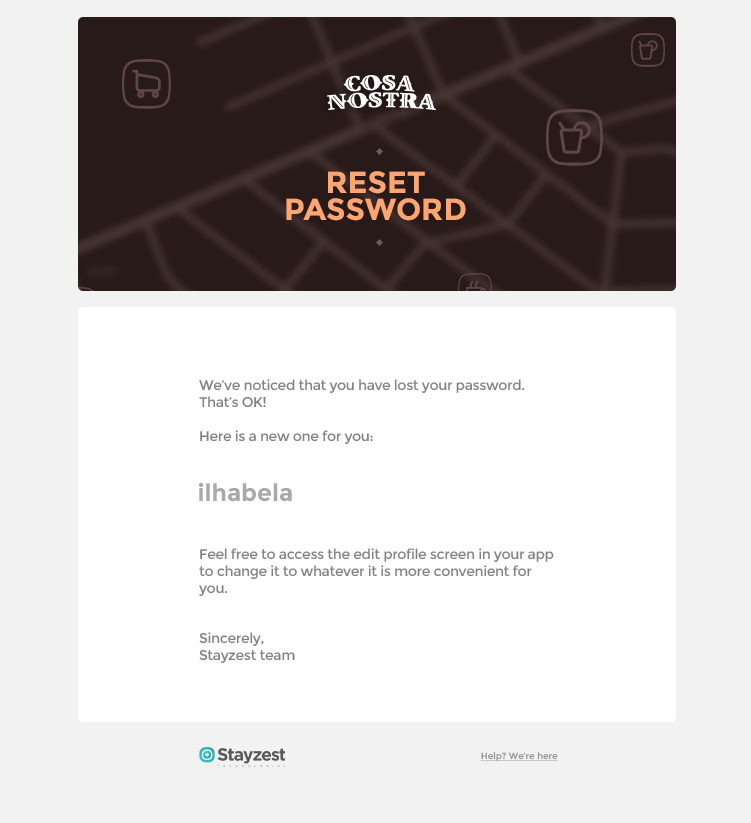
<style>
.page{position:relative;width:751px;height:823px;background:#ffffff}
.page>*{position:absolute;margin:0}
.t1{font:30.6px/27.2px "Montserrat-Bold";color:#ffa572;text-transform:uppercase}
.t2{font:14px "Montserrat-Regular";letter-spacing:-0.025em;color:#808285}
.t3{font:24px "Montserrat-Bold";color:#a7a9ac}
.t4{font:9px "Montserrat-Regular";color:#939598;text-decoration:underline}
</style>
<div class="page">
<p class="t1" style="left:286px;top:171px;width:180px;height:50px;text-align:center">Reset<br>password</p>
<p class="t2" style="left:199px;top:379px;width:326px;height:66px">We’ve noticed that you have lost your password. That’s OK! <br><br>Here is a new one for you:</p>
<p class="t3" style="left:199px;top:482px;width:93px;height:20px">ilhabela</p>
<p class="t2" style="left:199px;top:548px;width:355px;height:116px">Feel free to access the edit profile screen in your app to change it to whatever it is more convenient for you.<br><br><br>Sincerely,<br>Stayzest team</p>
<p class="t4" style="left:480px;top:752px;width:78px;height:9px">Help? We’re here</p>
</div>
